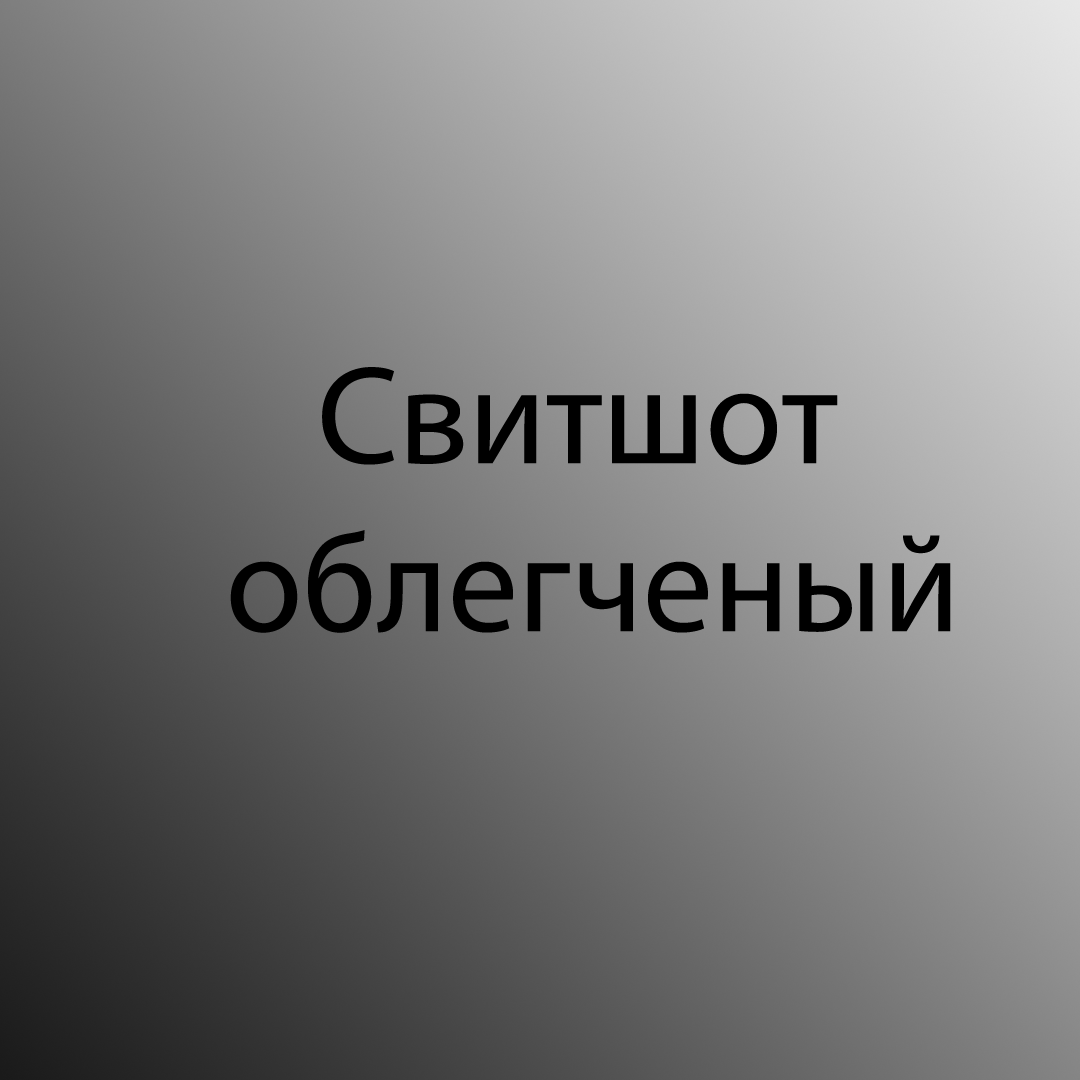
<style>
.page{position:relative;width:1080px;height:1080px}
.page>*{position:absolute;margin:0}
.t1{font:140px "MyriadPro-Regular";color:#000000}
</style>
<div class="page">
<p class="t1" style="left:230px;top:367px;width:721px;height:266px;text-align:center">Свитшот<br> облегченый</p>
</div>
